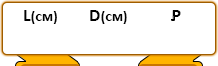
<style>
.page{position:relative;width:218px;height:66px;background:#ffffff}
.page>*{position:absolute;margin:0}
.t1{font:14px "Calibri-Bold";letter-spacing:0.01em;color:#000000;font-variant:small-caps}
.t2{font:18px "Calibri-Bold";letter-spacing:0.01em;color:#000000;font-variant:small-caps}
</style>
<div class="page">
<p class="t1" style="left:24px;top:10px;width:33px;height:14px"><span class="t2">L</span>(см)</p>
<p class="t1" style="left:90px;top:10px;width:37px;height:14px"><span class="t2">D</span>(см)</p>
<p class="t2" style="left:172px;top:10px;width:9px;height:11px">P</p>
</div>
